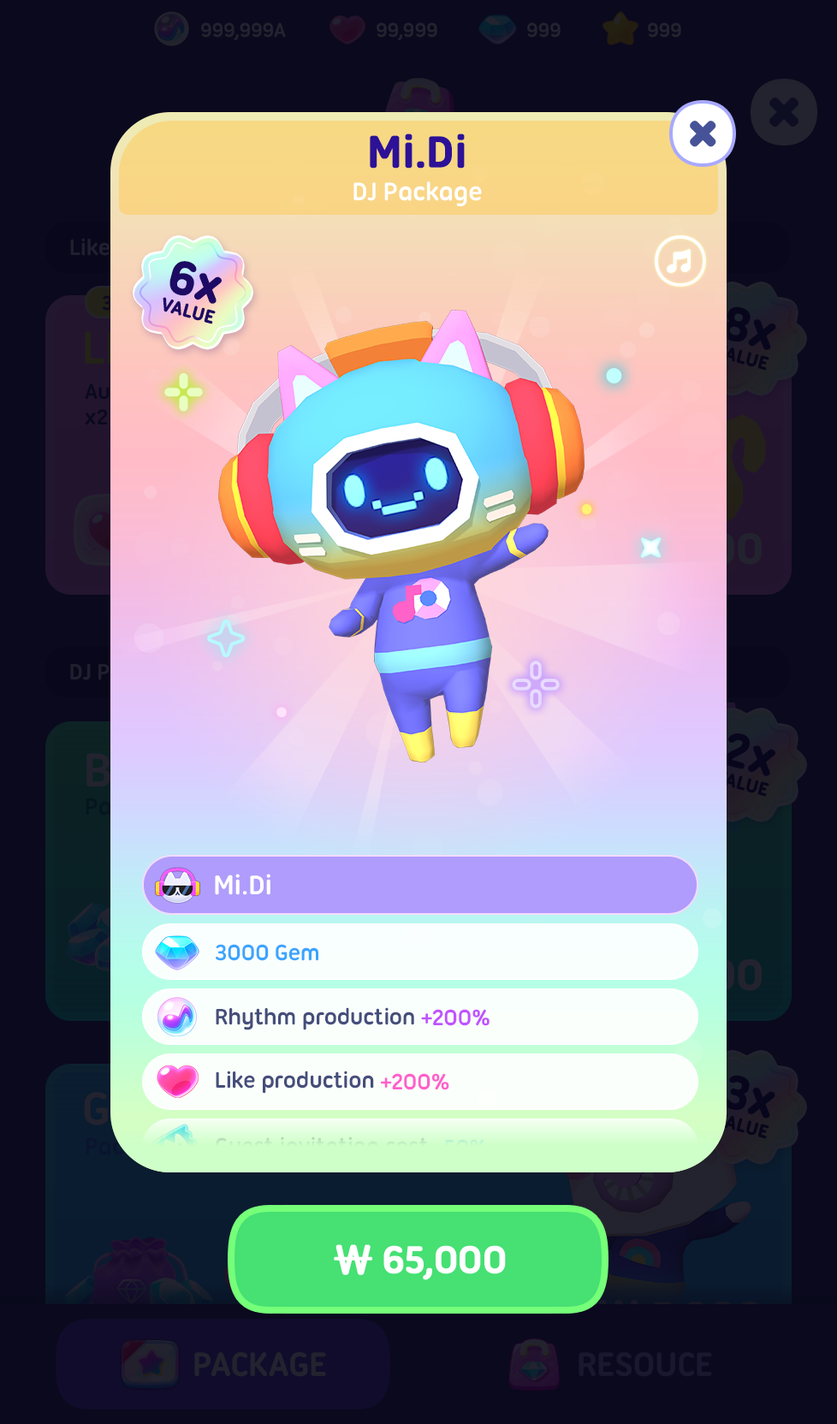
<style>
.page{position:relative;width:837px;height:1424px;background:#0a091e}
.page>*{position:absolute;margin:0}
.t1{font:47.9px "UbuntuTitling-Bold";letter-spacing:-0.025em;color:#2d1197;font-weight:bold}
.t2{font:27.4px "UbuntuTitling-Bold";letter-spacing:-0.025em;color:#ffffff}
.t3{font:49.9px "UbuntuTitling-Bold";letter-spacing:-0.025em;color:#1d0a64;font-weight:bold}
.t4{font:19.6px "UbuntuTitling-Bold";letter-spacing:-0.025em;color:#1d0a64;text-transform:uppercase;font-weight:bold}
.t5{font:29.1px "UbuntuTitling-Bold";letter-spacing:-0.025em;color:#ffffff}
.t6{font:24px "UbuntuTitling-Bold";letter-spacing:-0.025em;color:#3ba4ff}
.t7{font:24px "UbuntuTitling-Bold";letter-spacing:-0.025em;color:#454e7b}
.t8{font:24px "UbuntuTitling-Bold";letter-spacing:-0.025em;color:#c053ff}
.t9{font:24px "UbuntuTitling-Bold";letter-spacing:-0.025em;color:#ff60cc}
.t10{font:24px "UbuntuTitling-Bold";letter-spacing:-0.025em;color:#ceffc8}
.t11{font:41.1px "UbuntuTitling-Bold";letter-spacing:-0.04em;color:#ffffff;text-transform:uppercase;font-weight:bold}
.t12{font:41.1px "NanumSquareRoundOTFEB";letter-spacing:-0.04em;color:#ffffff;text-transform:uppercase;font-weight:bold}
</style>
<div class="page">
<p class="t1" style="left:370px;top:134px;width:95px;height:35px">Mi.Di</p>
<p class="t2" style="left:354px;top:181px;width:128px;height:25px">DJ Package</p>
<p class="t3" style="left:169px;top:261px;width:53px;height:43px;rotate:15deg">6x</p>
<p class="t4" style="left:163px;top:297px;width:53px;height:27px;rotate:15deg">Value</p>
<p class="t5" style="left:215px;top:874px;width:55px;height:21px">Mi.Di</p>
<p class="t6" style="left:216px;top:944px;width:102px;height:17px">3000 Gem</p>
<p class="t7" style="left:216px;top:1008px;width:274px;height:23px">Rhythm production <span class="t8">+200%</span></p>
<p class="t7" style="left:216px;top:1071px;width:233px;height:23px">Like production <span class="t9">+200%</span></p>
<p class="t10" style="left:216px;top:1137px;width:271px;height:19px">Guest invitation cost -50%</p>
<p class="t11" style="left:334px;top:1245px;width:172px;height:36px"><span class="t12">₩ </span>65,000</p>
</div>
